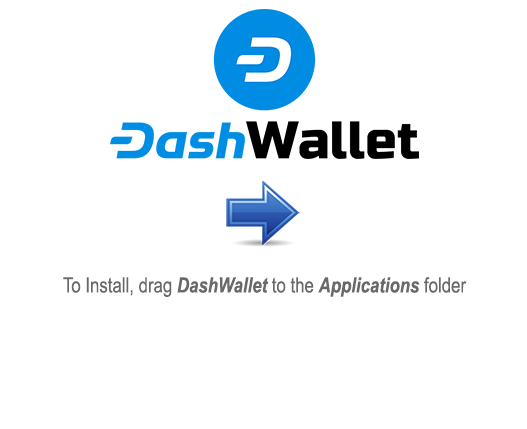
<style>
.page{position:relative;width:527px;height:429px;background:#ffffff}
.page>*{position:absolute;margin:0}
.t1{font:21px "ArialMT";color:#696969;scale:0.8 1}
.t2{font:21px "Arial-BoldItalicMT";color:#696969;scale:0.8 1}
</style>
<div class="page">
<p class="t1" style="left:63px;top:277px;width:404px;height:20px">To Install, drag <span class="t2">DashWallet</span> to the <span class="t2">Applications</span> folder</p>
</div>
